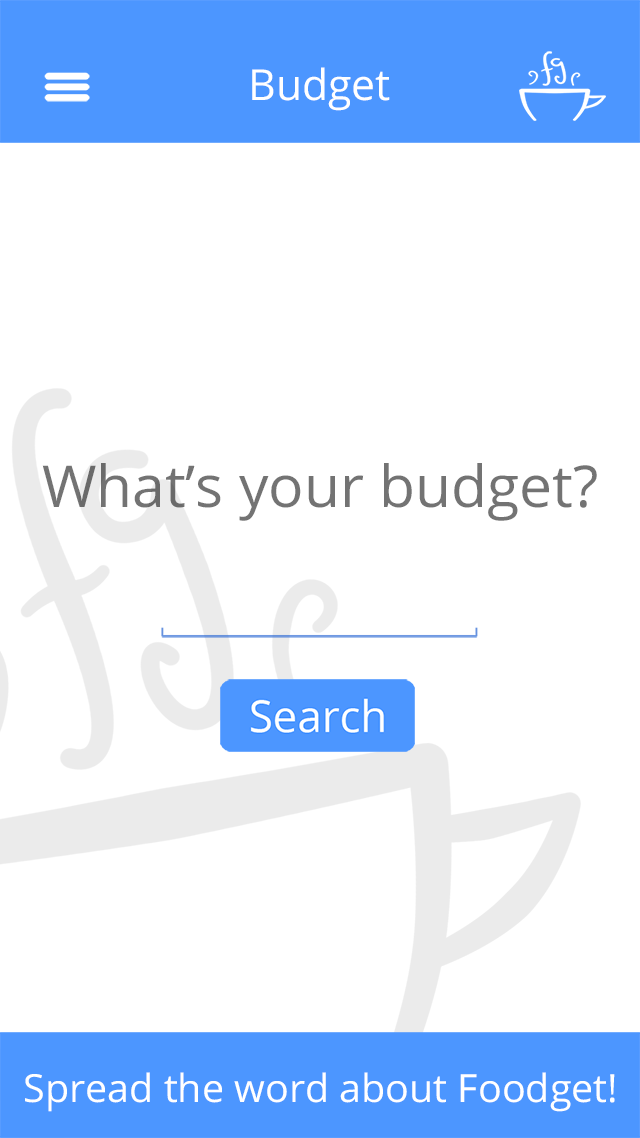
<style>
.page{position:relative;width:640px;height:1138px;background:#ffffff}
.page>*{position:absolute;margin:0}
.t1{font:42.7px "OpenSans";color:#ffffff}
.t2{font:57.8px "OpenSans";color:#737373}
.t3{font:38.8px "OpenSans";color:#ffffff}
</style>
<div class="page">
<p class="t1" style="left:252px;top:67px;width:138px;height:44px">Budget</p>
<p class="t2" style="left:42px;top:463px;width:555px;height:58px">What’s your budget?</p>
<p class="t3" style="left:25px;top:1072px;width:590px;height:40px">Spread the word about Foodget!</p>
</div>
